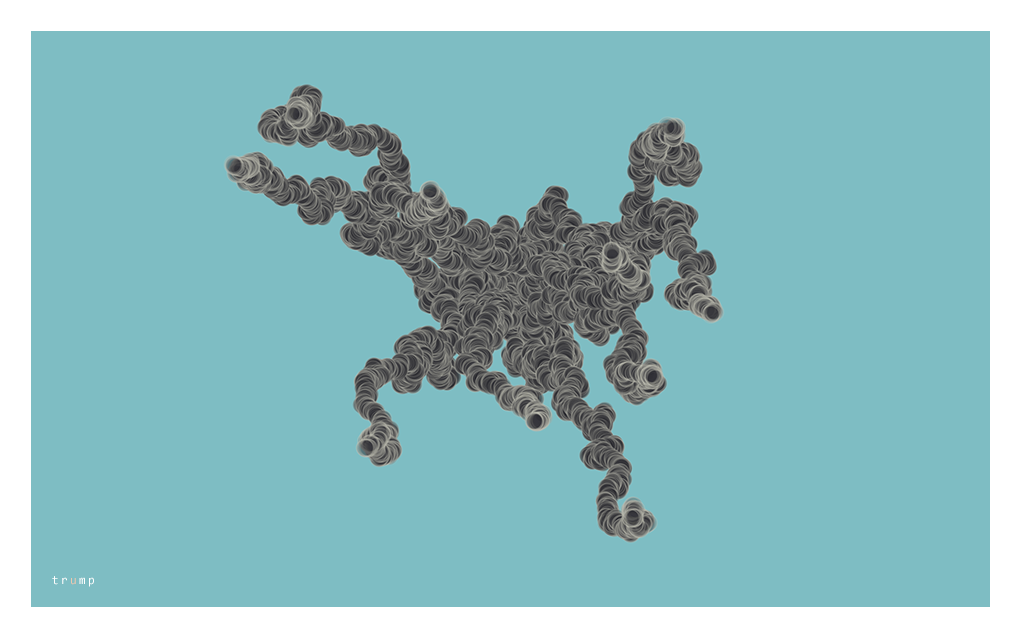
<style>
.page{position:relative;width:1021px;height:638px;background:#7ebdc3}
.page>*{position:absolute;margin:0}
.t1{font:12px "Consolas";letter-spacing:0.2em;color:#ffffff}
.t2{font:12px "Consolas";letter-spacing:0.2em;color:#ecc8af}
</style>
<div class="page">
<p class="t1" style="left:52px;top:576px;width:42px;height:11px">tr<span class="t2">u</span>mp</p>
</div>
